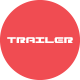
<style>
.page{position:relative;width:80px;height:80px;background:#f04c52}
.page>*{position:absolute;margin:0}
.t1{font:10px "Gunship";color:#ffffff}
</style>
<div class="page">
<p class="t1" style="left:7px;top:37px;width:66px;height:6px">TRAILER</p>
</div>
